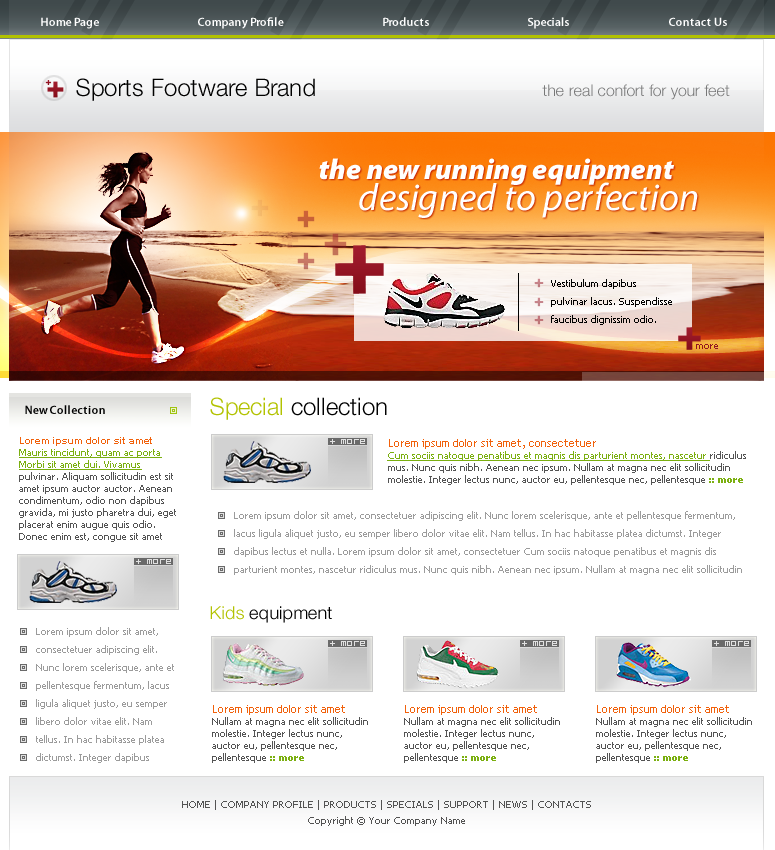
<style>
.page{position:relative;width:775px;height:850px;background:#ffffff}
.page>*{position:absolute;margin:0}
.t1{font:12px "MyriadPro-Semibold";color:#ffffff}
.t2{font:24px "HelveticaNeueLTPro-Lt";color:#000000}
.t3{font:16px "HelveticaNeueLTPro-Lt";color:#777778}
.t4{font:29px "MyriadPro-BlackIt";color:#ffffff}
.t5{font:38px "MyriadPro-It";color:#ffffff}
.t6{font:10px/18px "Tahoma";color:#000000}
.t7{font:10px "Tahoma";color:#911422}
.t8{font:24px "HelveticaNeueLTPro-Lt";color:#b2c200}
.t9{font:12px "MyriadPro-Semibold";color:#000000}
.t10{font:10px/12px "Tahoma";color:#535353}
.t11{font:10px/14px "Arial-BoldMT";color:#f1610b}
.t12{font:10px/12px "Tahoma";color:#7baf10;text-decoration:underline}
.t13{font:9px "BitLow";color:#e1e1e1}
.t14{font:11px/12px "TrebuchetMS";color:#f1610b}
.t15{font:10px/12px "Tahoma-Bold";color:#7baf10}
.t16{font:10px/18px "Tahoma";color:#9b9b9b}
.t17{font:18px "HelveticaNeueLTPro-Lt";color:#000000}
.t18{font:18px "HelveticaNeueLTPro-Lt";color:#b2c200}
.t19{font:10px/16px "Tahoma";color:#535353}
</style>
<div class="page">
<p class="t1" style="left:41px;top:17px;width:58px;height:12px">Home Page</p>
<p class="t1" style="left:198px;top:17px;width:86px;height:12px">Company Profile</p>
<p class="t1" style="left:383px;top:17px;width:46px;height:9px">Products</p>
<p class="t1" style="left:528px;top:17px;width:41px;height:12px">Specials</p>
<p class="t1" style="left:669px;top:17px;width:58px;height:9px">Contact Us</p>
<p class="t2" style="left:76px;top:78px;width:239px;height:23px">Sports Footware Brand</p>
<p class="t3" style="left:542px;top:84px;width:188px;height:16px">the real confort for your feet</p>
<p class="t4" style="left:319px;top:158px;width:355px;height:27px">the new running equipment</p>
<p class="t5" style="left:359px;top:182px;width:339px;height:36px">designed to perfection</p>
<p class="t6" style="left:551px;top:279px;width:121px;height:46px">Vestibulum dapibus pulvinar lacus. Suspendisse faucibus dignissim odio.</p>
<p class="t7" style="left:696px;top:344px;width:22px;height:5px">more</p>
<p class="t2" style="left:210px;top:397px;width:177px;height:23px"><span class="t8">Special </span>collection</p>
<p class="t9" style="left:25px;top:405px;width:80px;height:9px">New Collection</p>
<p class="t10" style="left:19px;top:437px;width:157px;height:105px"><span class="t11">Lorem ipsum dolor sit amet<br></span><span class="t12">Mauris tincidunt, quam ac porta Morbi sit amet dui. Vivamus </span>pulvinar. Aliquam sollicitudin est sit amet ipsum auctor auctor. Aenean condimentum, odio non dapibus gravida, mi justo pharetra dui, eget placerat enim augue quis odio. Donec enim est, congue sit amet</p>
<p class="t13" style="left:330px;top:439px;width:35px;height:5px">+ MORE</p>
<p class="t10" style="left:387px;top:439px;width:359px;height:46px"><span class="t14">Lorem ipsum dolor sit amet, consectetuer <br></span><span class="t12">Cum sociis natoque penatibus et magnis dis parturient montes, nascetur </span>ridiculus mus. Nunc quis nibh. Aenean nec ipsum. Nullam at magna nec elit sollicitudin molestie. Integer lectus nunc, auctor eu, pellentesque nec, pellentesque <span class="t15">:: more</span></p>
<p class="t16" style="left:234px;top:511px;width:508px;height:64px">Lorem ipsum dolor sit amet, consectetuer adipiscing elit. Nunc lorem scelerisque, ante et pellentesque fermentum, lacus ligula aliquet justo, eu semper libero dolor vitae elit. Nam tellus. In hac habitasse platea dictumst. Integer dapibus lectus et nulla. Lorem ipsum dolor sit amet, consectetuer Cum sociis natoque penatibus et magnis dis parturient montes, nascetur ridiculus mus. Nunc quis nibh. Aenean nec ipsum. Nullam at magna nec elit sollicitudin</p>
<p class="t13" style="left:136px;top:559px;width:35px;height:5px">+ MORE</p>
<p class="t17" style="left:210px;top:606px;width:122px;height:17px"><span class="t18">Kids </span>equipment</p>
<p class="t16" style="left:36px;top:627px;width:138px;height:136px">Lorem ipsum dolor sit amet, consectetuer adipiscing elit. Nunc lorem scelerisque, ante et pellentesque fermentum, lacus ligula aliquet justo, eu semper libero dolor vitae elit. Nam tellus. In hac habitasse platea dictumst. Integer dapibus</p>
<p class="t13" style="left:330px;top:641px;width:35px;height:5px">+ MORE</p>
<p class="t13" style="left:522px;top:641px;width:35px;height:5px">+ MORE</p>
<p class="t13" style="left:714px;top:641px;width:35px;height:5px">+ MORE</p>
<p class="t10" style="left:212px;top:705px;width:156px;height:58px"><span class="t14">Lorem ipsum dolor sit amet<br></span>Nullam at magna nec elit sollicitudin molestie. Integer lectus nunc, auctor eu, pellentesque nec, pellentesque <span class="t15">:: more</span></p>
<p class="t10" style="left:404px;top:705px;width:156px;height:58px"><span class="t14">Lorem ipsum dolor sit amet<br></span>Nullam at magna nec elit sollicitudin molestie. Integer lectus nunc, auctor eu, pellentesque nec, pellentesque <span class="t15">:: more</span></p>
<p class="t10" style="left:596px;top:705px;width:156px;height:58px"><span class="t14">Lorem ipsum dolor sit amet<br></span>Nullam at magna nec elit sollicitudin molestie. Integer lectus nunc, auctor eu, pellentesque nec, pellentesque <span class="t15">:: more</span></p>
<p class="t19" style="left:182px;top:800px;width:409px;height:26px;text-align:center">HOME | COMPANY PROFILE | PRODUCTS | SPECIALS | SUPPORT | NEWS | CONTACTS<br>Copyright © Your Company Name</p>
</div>
